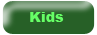
<style>
.page{position:relative;width:97px;height:35px;background:#276027}
.page>*{position:absolute;margin:0}
.t1{font:14px "Arial-Black";color:#66ff66}
</style>
<div class="page">
<p class="t1" style="left:27px;top:10px;width:57px;height:19px">Kids</p>
</div>
